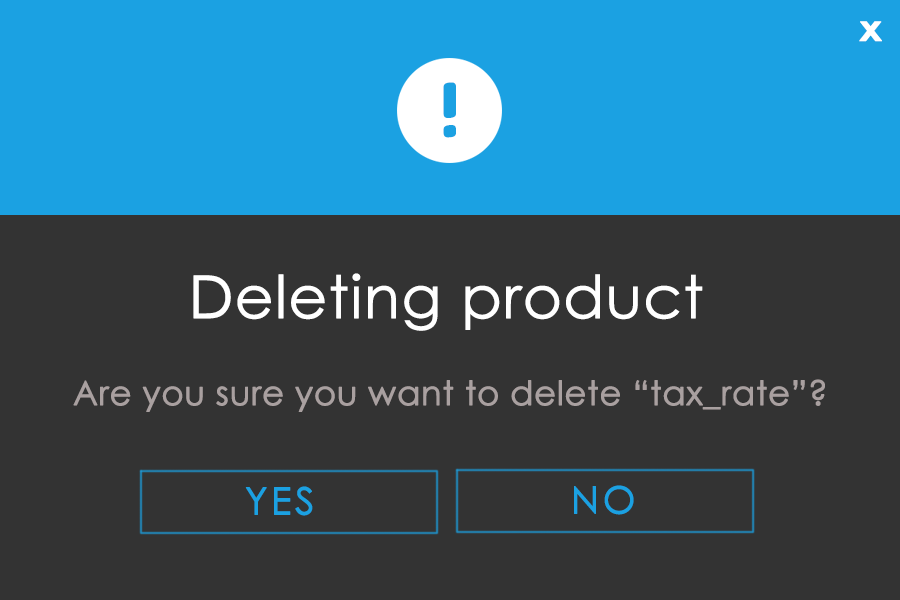
<style>
.page{position:relative;width:900px;height:600px;background:#333333}
.page>*{position:absolute;margin:0}
.t1{font:36px "CenturyGothic-Bold";color:#ffffff;font-weight:bold;scale:1.11 1}
.t2{font:79.2px "ChocolateCavalcade";color:#1ba1e2;font-weight:bold}
.t3{font:59.1px "CenturyGothic";color:#ffffff;font-weight:bold}
.t4{font:33.3px "CenturyGothic";color:#a9a0a0;font-weight:bold}
.t5{font:37.7px "CenturyGothic";letter-spacing:0.08em;color:#1ba1e2;font-weight:bold}
</style>
<div class="page">
<p class="t1" style="left:859px;top:21px;width:23px;height:21px">x</p>
<p class="t2" style="left:443px;top:82px;width:13px;height:56px">!</p>
<p class="t3" style="left:193px;top:273px;width:510px;height:58px">Deleting product</p>
<p class="t4" style="left:73px;top:379px;width:752px;height:33px">Are you sure you want to delete “tax_rate”?</p>
<p class="t5" style="left:245px;top:486px;width:68px;height:30px">YES</p>
<p class="t5" style="left:574px;top:485px;width:60px;height:30px">NO</p>
</div>
